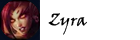
<style>
.page{position:relative;width:140px;height:40px;background:#ffffff}
.page>*{position:absolute;margin:0}
.t1{font:16px "VinerHandITC";color:#000000}
</style>
<div class="page">
<p class="t1" style="left:48px;top:13px;width:39px;height:22px">Zyra</p>
</div>
